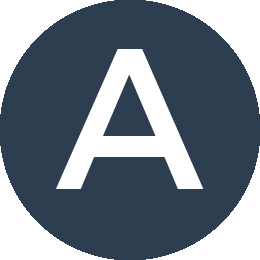
<style>
.page{position:relative;width:260px;height:260px;background:#2c3e50}
.page>*{position:absolute;margin:0}
.t1{font:200px "Montserrat-Regular";color:#ffffff}
</style>
<div class="page">
<p class="t1" style="left:56px;top:49px;width:148px;height:140px">A</p>
</div>
